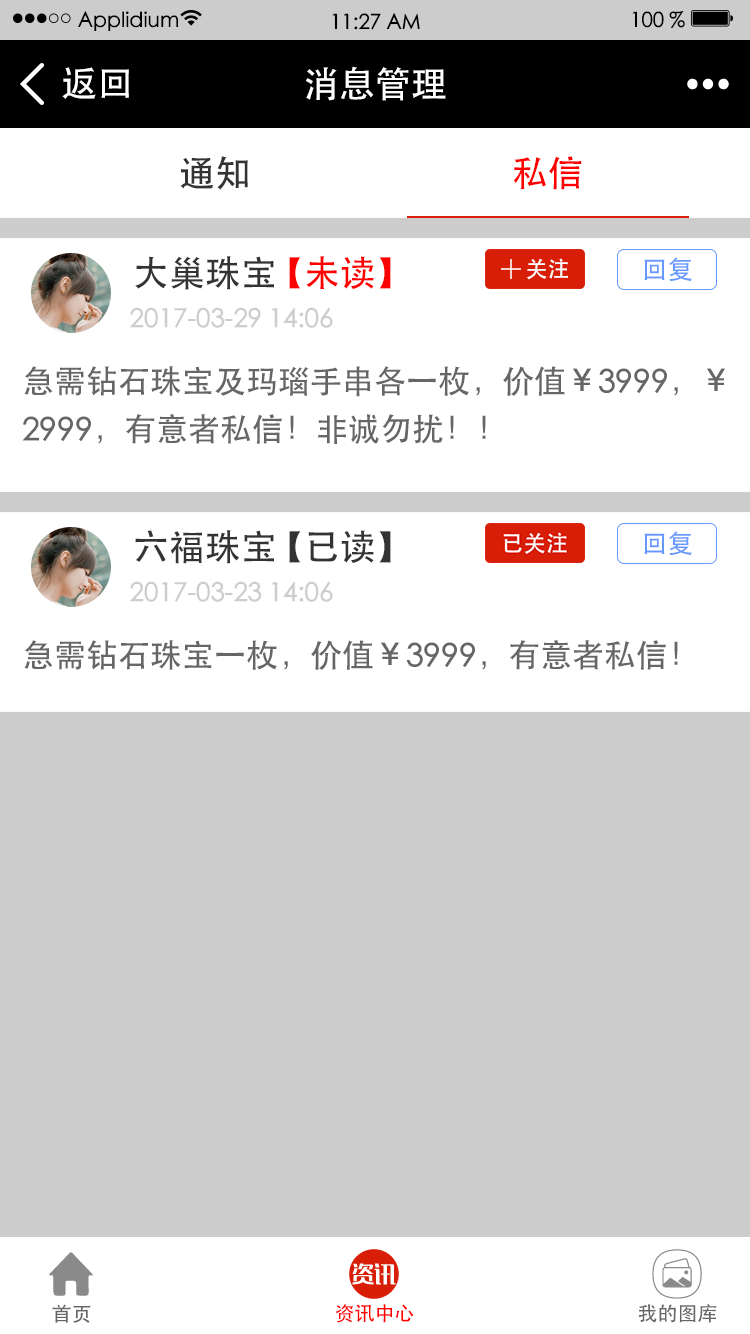
<style>
.page{position:relative;width:750px;height:1334px;background:#ffffff}
.page>*{position:absolute;margin:0}
.t1{font:20.9px "STHeiti";color:#000000}
.t2{font:36px "STHeiti";color:#ffffff}
.t3{font:36px "STHeiti";color:#333333}
.t4{font:36px "STHeiti";color:#ff0000}
.t5{font:26px "STHeiti";color:#6699ff}
.t6{font:22px "STHeiti";color:#ffffff}
.t7{font:26px "STHeiti";color:#cdcdcd}
.t8{font:32px/48px "STHeiti";color:#666666}
.t9{font:32px "STHeiti";color:#666666}
.t10{font:20px "STHeiti";color:#666666}
.t11{font:20px "STHeiti";color:#ff0000}
</style>
<div class="page">
<p class="t1" style="left:78px;top:11px;width:100px;height:20px">Applidium</p>
<p class="t1" style="left:332px;top:13px;width:88px;height:17px">11:27 AM</p>
<p class="t1" style="left:632px;top:11px;width:53px;height:17px">100 %</p>
<p class="t2" style="left:62px;top:67px;width:67px;height:32px">返回</p>
<p class="t2" style="left:306px;top:66px;width:140px;height:35px">消息管理</p>
<p class="t3" style="left:180px;top:156px;width:68px;height:34px">通知</p>
<p class="t4" style="left:513px;top:156px;width:69px;height:34px">私信</p>
<p class="t3" style="left:135px;top:256px;width:256px;height:34px">大巢珠宝 <span class="t4">【未读】</span></p>
<p class="t5" style="left:644px;top:257px;width:48px;height:24px">回复</p>
<p class="t6" style="left:526px;top:258px;width:42px;height:22px">关注</p>
<p class="t7" style="left:129px;top:307px;width:204px;height:21px">2017-03-29 14:06</p>
<p class="t8" style="left:22px;top:366px;width:704px;height:78px">急需钻石珠宝及玛瑙手串各一枚，价值￥3999，￥<br>2999，有意者私信！非诚勿扰！！</p>
<p class="t3" style="left:135px;top:530px;width:256px;height:34px">六福珠宝 【已读】</p>
<p class="t5" style="left:644px;top:531px;width:48px;height:24px">回复</p>
<p class="t7" style="left:129px;top:581px;width:204px;height:21px">2017-03-23 14:06</p>
<p class="t9" style="left:24px;top:640px;width:654px;height:30px">急需钻石珠宝一枚，价值￥3999，有意者私信！</p>
<p class="t10" style="left:52px;top:1304px;width:39px;height:19px">首页</p>
<p class="t11" style="left:335px;top:1304px;width:79px;height:19px">资讯中心</p>
<p class="t10" style="left:638px;top:1304px;width:79px;height:19px">我的图库</p>
</div>
